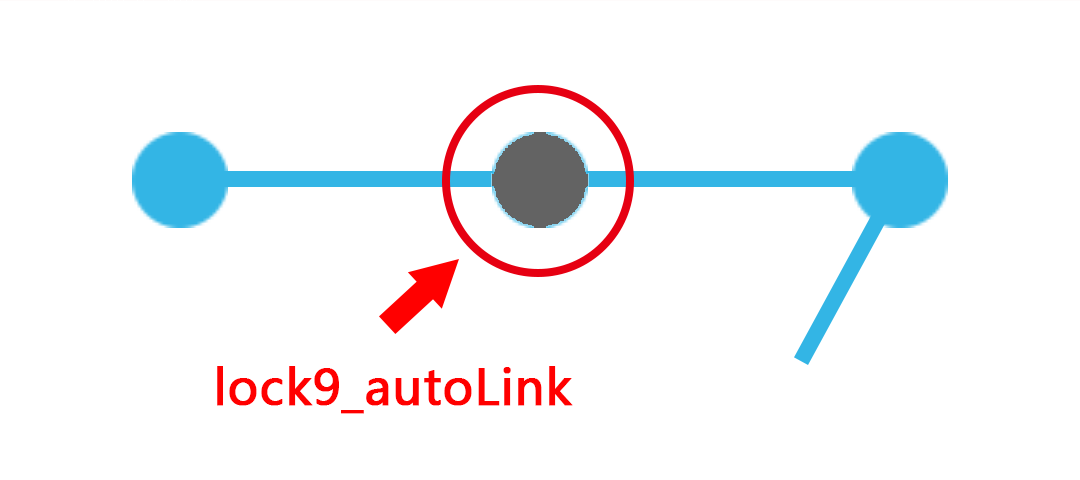
<style>
.page{position:relative;width:1080px;height:480px;background:#ffffff}
.page>*{position:absolute;margin:0}
.t1{font:48px "MicrosoftYaHei";color:#ff0000;font-weight:bold}
</style>
<div class="page">
<p class="t1" style="left:217px;top:366px;width:356px;height:48px">lock9_autoLink</p>
</div>
